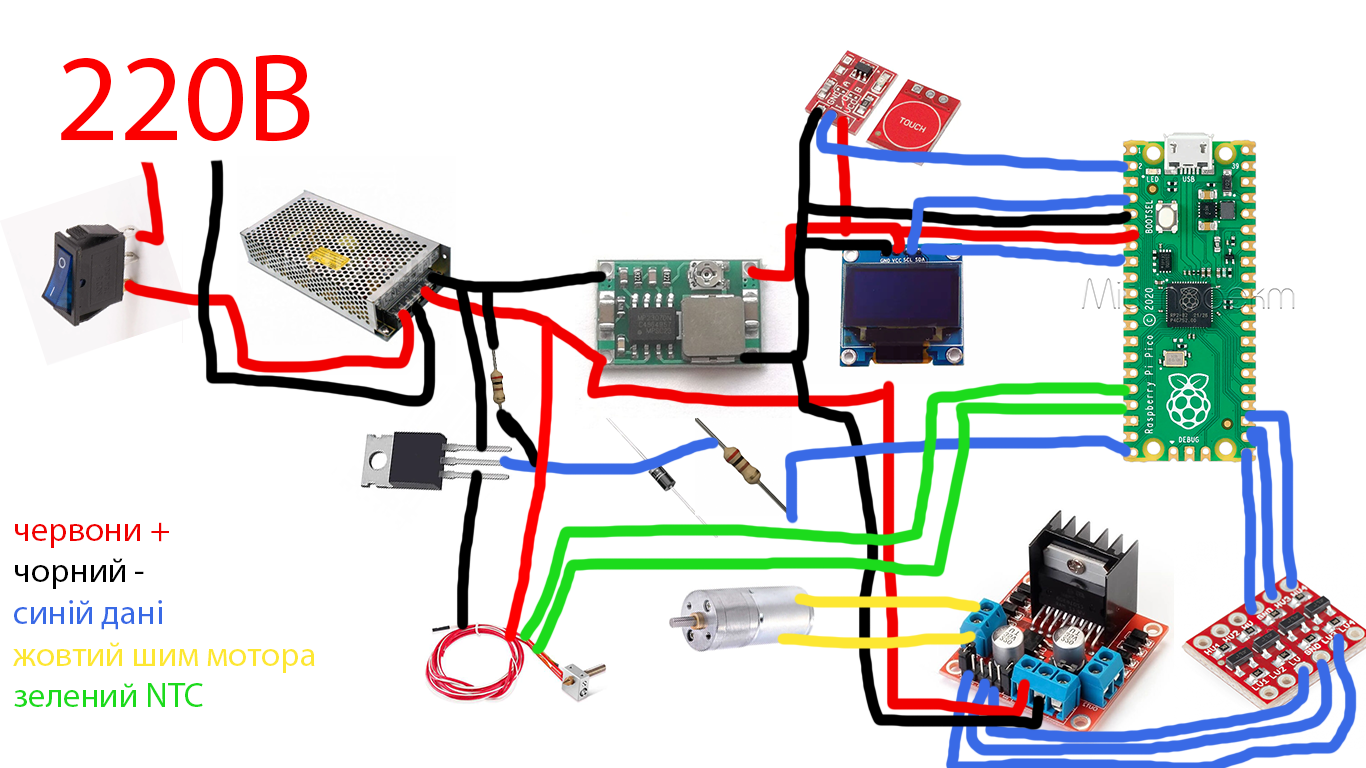
<style>
.page{position:relative;width:1366px;height:768px;background:#ffffff}
.page>*{position:absolute;margin:0}
.t1{font:125px "MyriadPro-Regular";color:#fc0000}
.t2{font:34.7px "MyriadPro-Regular";color:#fde732}
.t3{font:34.7px "MyriadPro-Regular";color:#f10000}
.t4{font:34.7px "MyriadPro-Regular";color:#000000}
.t5{font:34.7px "MyriadPro-Regular";color:#396ae6}
.t6{font:34.7px "MyriadPro-Regular";color:#1cdb1c}
</style>
<div class="page">
<p class="t1" style="left:61px;top:54px;width:249px;height:88px">220B</p>
<p class="t2" style="left:13px;top:522px;width:302px;height:185px"><span class="t3">червони +<br></span><span class="t4">чорний - <br></span><span class="t5">синій дані<br></span>жовтий шим мотора<br><span class="t6">зелений NTC</span></p>
</div>
